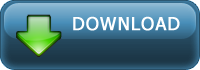
<style>
.page{position:relative;width:200px;height:70px}
.page>*{position:absolute;margin:0}
.t1{font:18px "Tahoma";letter-spacing:0.05em;color:#ffffff;font-weight:bold}
</style>
<div class="page">
<p class="t1" style="left:73px;top:16px;width:107px;height:15px">DOWNLOAD</p>
</div>
